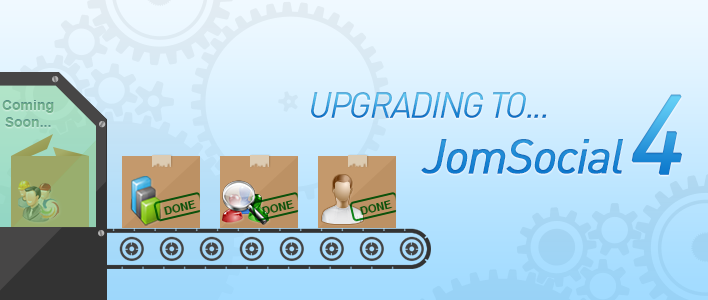
<style>
.page{position:relative;width:708px;height:300px}
.page>*{position:absolute;margin:0}
.t1{font:14px "Arial-BoldMT";color:#6fae8b}
.t2{font:36px "DIN-RegularItalic";letter-spacing:-0.05em;text-transform:uppercase}
.t3{font:48px "DIN-RegularItalic";letter-spacing:-0.05em;color:#1d87d3;font-weight:bold}
.t4{font:48px "DIN-RegularItalic";letter-spacing:-0.05em;color:#1d87d3}
.t5{font:108px "DIN-RegularItalic";letter-spacing:-0.05em;color:#1d87d3;font-weight:bold}
</style>
<div class="page">
<p class="t1" style="left:2px;top:100px;width:52px;height:27px;text-align:center">Coming<br>Soon...</p>
<p class="t2" style="left:311px;top:92px;width:236px;height:26px">Upgrading To...</p>
<p class="t3" style="left:421px;top:94px;width:262px;height:81px"><span class="t4"> </span>JomSocial <span class="t5">4</span></p>
</div>
